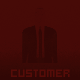
<style>
.page{position:relative;width:80px;height:80px;background:#460a07}
.page>*{position:absolute;margin:0}
.t1{font:12px "hooge05_55Cyr2";color:#5a0d09}
</style>
<div class="page">
<p class="t1" style="left:11px;top:69px;width:59px;height:8px">customer</p>
</div>
